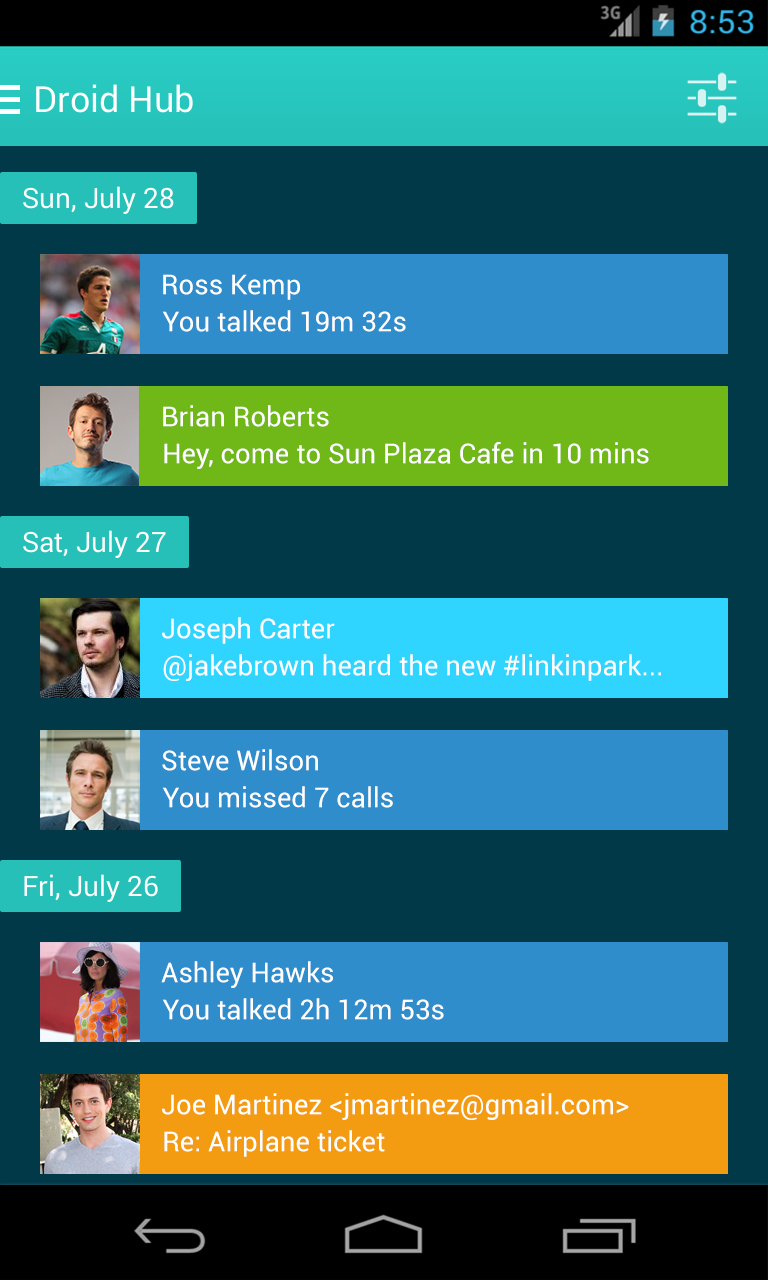
<style>
.page{position:relative;width:768px;height:1280px;background:#013948}
.page>*{position:absolute;margin:0}
.t1{font:27.6px "Roboto-Regular";color:#ffffff}
</style>
<div class="page">
<p class="t1" style="left:163px;top:274px;width:137px;height:26px">Ross Kemp</p>
<p class="t1" style="left:162px;top:310px;width:244px;height:22px">You talked 19m 32s</p>
<p class="t1" style="left:163px;top:405px;width:166px;height:22px">Brian Roberts</p>
<p class="t1" style="left:164px;top:442px;width:485px;height:27px">Hey, come to Sun Plaza Cafe in 10 mins</p>
<p class="t1" style="left:162px;top:617px;width:173px;height:27px">Joseph Carter</p>
<p class="t1" style="left:163px;top:654px;width:498px;height:27px">@jakebrown heard the new #linkinpark...</p>
<p class="t1" style="left:162px;top:749px;width:156px;height:22px">Steve Wilson</p>
<p class="t1" style="left:162px;top:786px;width:231px;height:22px">You missed 7 calls</p>
<p class="t1" style="left:161px;top:961px;width:172px;height:27px">Ashley Hawks</p>
<p class="t1" style="left:162px;top:998px;width:282px;height:22px">You talked 2h 12m 53s</p>
<p class="t1" style="left:162px;top:1093px;width:467px;height:27px">Joe Martinez &lt;jmartinez@gmail.com&gt;</p>
<p class="t1" style="left:164px;top:1130px;width:221px;height:27px">Re: Airplane ticket</p>
</div>
